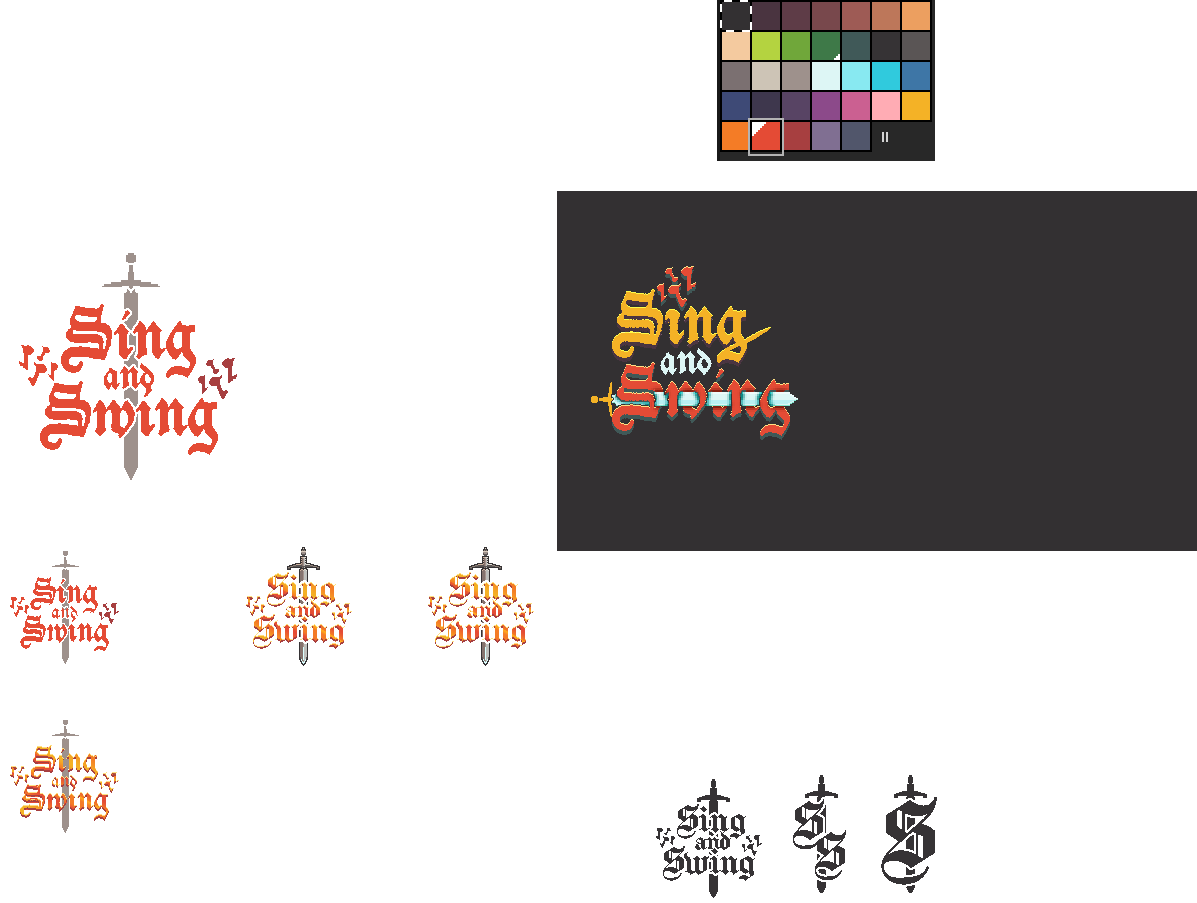
<style>
.page{position:relative;width:1197px;height:903px;background:#ffffff}
.page>*{position:absolute;margin:0}
.t1{font:81.3px "Deutschische";color:#f4b226}
.t2{font:81.3px "Deutschische";color:#e44b35}
.t3{font:48.3px "Deutschische";color:#ddf6f5}
.t4{font:48.3px "Deutschische";color:#e44b35}
.t5{font:40.6px "Deutschische";color:#e44b35}
.t6{font:24.1px "Deutschische";color:#e44b35}
.t7{font:88.8px "Chomsky";color:#363335}
.t8{font:50.8px "Chomsky";color:#363335}
</style>
<div class="page">
<p class="t1" style="left:612px;top:289px;width:135px;height:74px">Sing</p>
<p class="t2" style="left:61px;top:304px;width:135px;height:74px">Sing</p>
<p class="t3" style="left:660px;top:348px;width:52px;height:27px">and</p>
<p class="t4" style="left:103px;top:363px;width:52px;height:27px">and</p>
<p class="t2" style="left:612px;top:362px;width:178px;height:74px">Swing</p>
<p class="t2" style="left:40px;top:381px;width:178px;height:74px">Swing</p>
<p class="t5" style="left:30px;top:577px;width:68px;height:37px">Sing</p>
<p class="t6" style="left:52px;top:606px;width:26px;height:13px">and</p>
<p class="t5" style="left:20px;top:615px;width:89px;height:37px">Swing</p>
<p class="t7" style="left:881px;top:797px;width:56px;height:88px">S</p>
<p class="t8" style="left:793px;top:799px;width:31px;height:51px">S</p>
<p class="t8" style="left:815px;top:830px;width:31px;height:51px">S</p>
</div>
